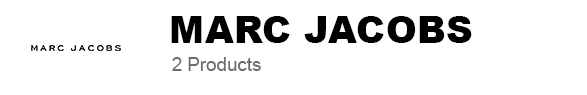
<style>
.page{position:relative;width:587px;height:95px;background:#ffffff}
.page>*{position:absolute;margin:0}
.t1{font:37.5px "Arial-Black";color:#000000}
.t2{font:18.7px "ArialMT";color:#6d6d6d}
</style>
<div class="page">
<p class="t1" style="left:171px;top:16px;width:301px;height:27px">MARC JACOBS</p>
<p class="t2" style="left:172px;top:57px;width:89px;height:14px">2 Products</p>
</div>
